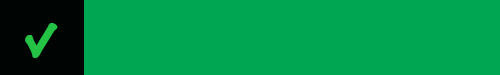
<style>
.page{position:relative;width:500px;height:75px;background:#00a651}
.page>*{position:absolute;margin:0}
.t1{font:75px "MarkerFelt-Thin";letter-spacing:-0.005em;color:#25c345}
</style>
<div class="page">
<p class="t1" style="left:25px;top:23px;width:33px;height:35px">√</p>
</div>
